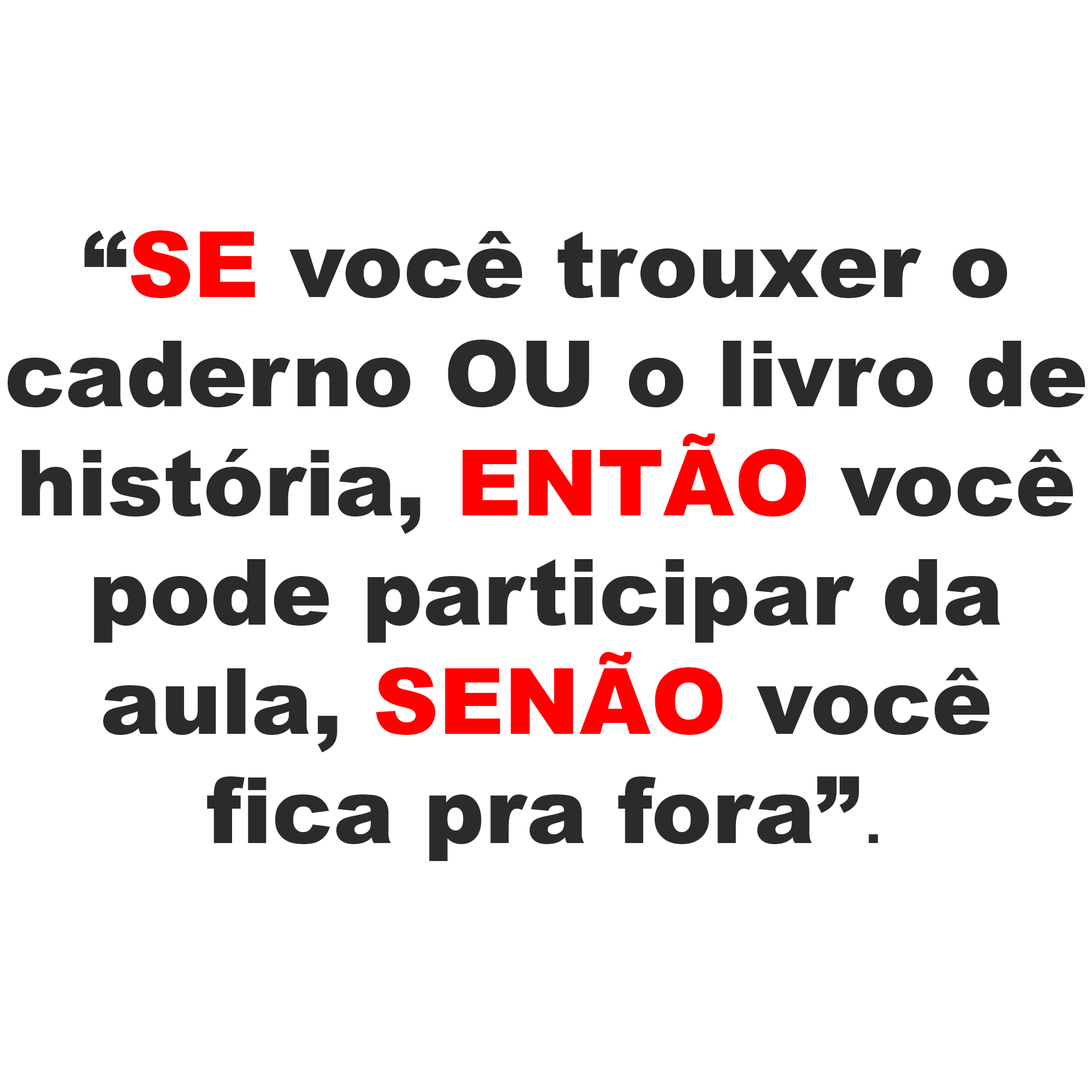
<style>
.page{position:relative;width:1092px;height:1092px;background:#ffffff}
.page>*{position:absolute;margin:0}
.t1{font:91px "Arial-Black";color:#2b2b2b}
.t2{font:91px "Arial-Black";color:#ff0000}
.t3{font:91px "ArialMT";color:#2b2b2b}
</style>
<div class="page">
<p class="t1" style="left:8px;top:230px;width:1077px;height:631px;text-align:center">“<span class="t2">SE</span> você trouxer o<br>caderno OU o livro de<br>história, <span class="t2">ENTÃO</span> você<br>pode participar da<br>aula, <span class="t2">SENÃO</span> você<br>fica pra fora”<span class="t3">.</span></p>
</div>
